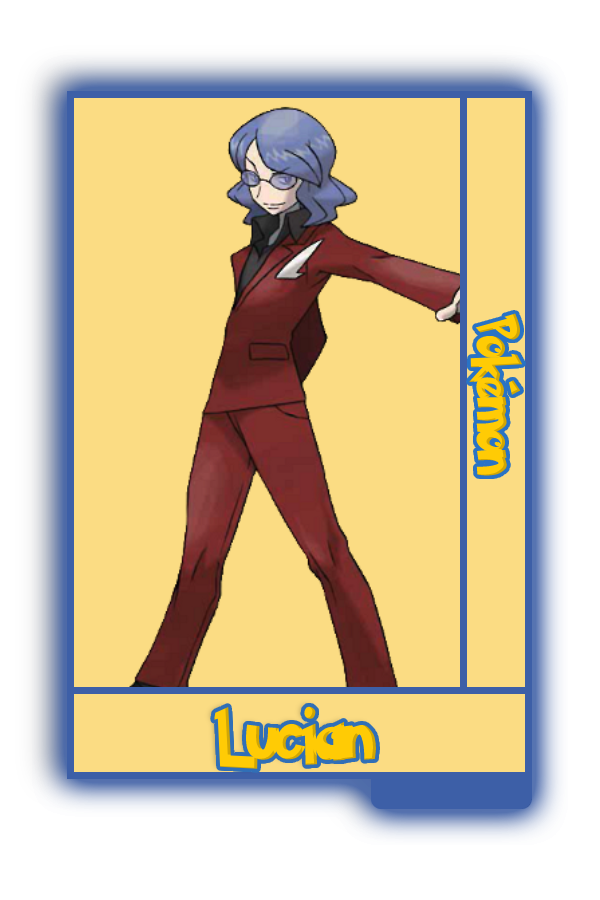
<style>
.page{position:relative;width:600px;height:900px;background:#fbdc83}
.page>*{position:absolute;margin:0}
.t1{font:48.8px "PokemonSolidNormal";color:#ffcb05;scale:0.8 1}
.t2{font:56.6px "PokemonSolidNormal";color:#ffcb05;scale:0.92 1}
</style>
<div class="page">
<p class="t1" style="left:469px;top:313px;width:54px;height:163px;rotate:90deg">Pokémon</p>
<p class="t2" style="left:214px;top:706px;width:162px;height:63px">Lucian</p>
</div>
